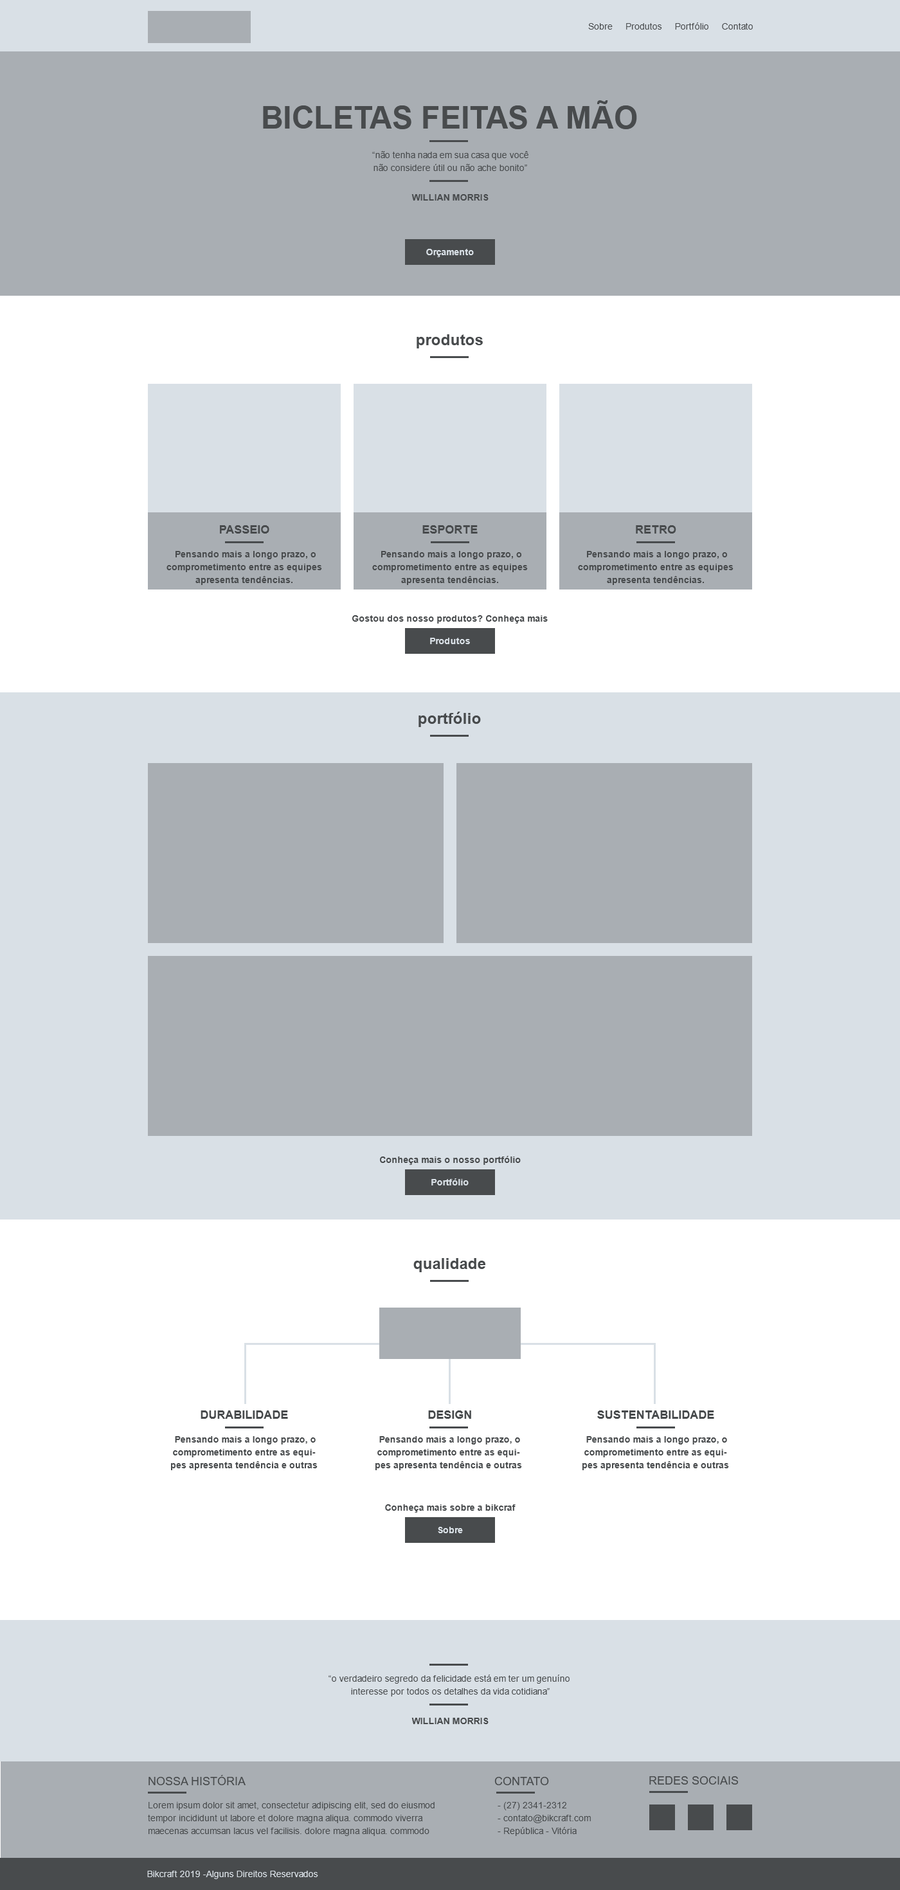
<style>
.page{position:relative;width:900px;height:1890px;background:#ffffff}
.page>*{position:absolute;margin:0}
.t1{font:9px "ArialMT";color:#484b4d}
.t2{font:30.9px "Arial-BoldMT";color:#484b4d;text-transform:uppercase}
.t3{font:9px/12.9px "ArialMT";color:#484b4d}
.t4{font:9px "Arial-BoldMT";color:#484b4d;text-transform:uppercase}
.t5{font:9px "Arial-BoldMT";color:#d9e0e6}
.t6{font:15.4px "Arial-BoldMT";color:#484b4d}
.t7{font:11.6px "Arial-BoldMT";color:#484b4d;text-transform:uppercase}
.t8{font:9px/12.9px "Arial-BoldMT";color:#484b4d}
.t9{font:9px "Arial-BoldMT";color:#484b4d}
.t10{font:11.6px "ArialMT";color:#484b4d;text-transform:uppercase}
.t11{font:9px "ArialMT";color:#d9e0e6}
</style>
<div class="page">
<p class="t1" style="left:588px;top:22px;width:165px;height:8px">Sobre     Produtos     Portfólio     Contato</p>
<p class="t2" style="left:263px;top:100px;width:374px;height:29px">Bicletas Feitas a Mão</p>
<p class="t3" style="left:372px;top:151px;width:156px;height:20px;text-align:center">“não tenha nada em sua casa que você<br>não considere útil ou não ache bonito”</p>
<p class="t4" style="left:411px;top:194px;width:78px;height:7px">willian morris</p>
<p class="t5" style="left:426px;top:249px;width:48px;height:8px">Orçamento</p>
<p class="t6" style="left:417px;top:334px;width:66px;height:14px">produtos</p>
<p class="t7" style="left:220px;top:525px;width:49px;height:9px">passeio</p>
<p class="t7" style="left:422px;top:525px;width:56px;height:9px">esporte</p>
<p class="t7" style="left:636px;top:525px;width:40px;height:9px">retro</p>
<p class="t8" style="left:166px;top:551px;width:156px;height:34px;text-align:center">Pensando mais a longo prazo, o comprometimento entre as equipes apresenta tendências.</p>
<p class="t8" style="left:372px;top:551px;width:156px;height:34px;text-align:center">Pensando mais a longo prazo, o comprometimento entre as equipes apresenta tendências.</p>
<p class="t8" style="left:578px;top:551px;width:155px;height:34px;text-align:center">Pensando mais a longo prazo, o comprometimento entre as equipes apresenta tendências.</p>
<p class="t9" style="left:352px;top:615px;width:196px;height:9px">Gostou dos nosso produtos? Conheça mais</p>
<p class="t5" style="left:430px;top:638px;width:40px;height:6px">Produtos</p>
<p class="t6" style="left:418px;top:712px;width:63px;height:15px">portfólio</p>
<p class="t9" style="left:380px;top:1156px;width:141px;height:9px">Conheça mais o nosso portfólio</p>
<p class="t5" style="left:431px;top:1178px;width:38px;height:7px">Portfólio</p>
<p class="t6" style="left:413px;top:1258px;width:72px;height:14px">qualidade</p>
<p class="t7" style="left:201px;top:1410px;width:87px;height:9px">durabilidade</p>
<p class="t7" style="left:428px;top:1410px;width:43px;height:9px">DESIGN</p>
<p class="t7" style="left:597px;top:1410px;width:117px;height:9px">SUSTENTABILIDADE</p>
<p class="t8" style="left:171px;top:1436px;width:147px;height:34px;text-align:center">Pensando mais a longo prazo, o comprometimento entre as equipes apresenta tendência e outras</p>
<p class="t8" style="left:375px;top:1436px;width:147px;height:34px;text-align:center">Pensando mais a longo prazo, o comprometimento entre as equipes apresenta tendência e outras</p>
<p class="t8" style="left:582px;top:1436px;width:147px;height:34px;text-align:center">Pensando mais a longo prazo, o comprometimento entre as equipes apresenta tendência e outras</p>
<p class="t9" style="left:385px;top:1504px;width:131px;height:9px">Conheça mais sobre a bikcraf</p>
<p class="t5" style="left:438px;top:1527px;width:25px;height:6px">Sobre</p>
<p class="t3" style="left:328px;top:1675px;width:242px;height:21px;text-align:center">“o verdadeiro segredo da felicidade está em ter um genuíno <br>interesse por todos os detalhes da vida cotidiana”</p>
<p class="t4" style="left:411px;top:1718px;width:78px;height:6px">willian morris</p>
<p class="t10" style="left:148px;top:1775px;width:98px;height:10px">Nossa História</p>
<p class="t10" style="left:494px;top:1777px;width:55px;height:8px">contato</p>
<p class="t10" style="left:649px;top:1776px;width:89px;height:9px">redes sociais</p>
<p class="t3" style="left:148px;top:1802px;width:287px;height:34px">Lorem ipsum dolor sit amet, consectetur adipiscing elit, sed do eiusmod tempor incididunt ut labore et dolore magna aliqua. commodo viverra maecenas accumsan lacus vel facilisis. dolore magna aliqua. commodo</p>
<p class="t3" style="left:498px;top:1802px;width:93px;height:34px">- (27) 2341-2312<br> - contato@bikcraft.com<br> - República - Vitória</p>
<p class="t11" style="left:147px;top:1871px;width:171px;height:8px">Bikcraft 2019 -Alguns Direitos Reservados</p>
</div>
